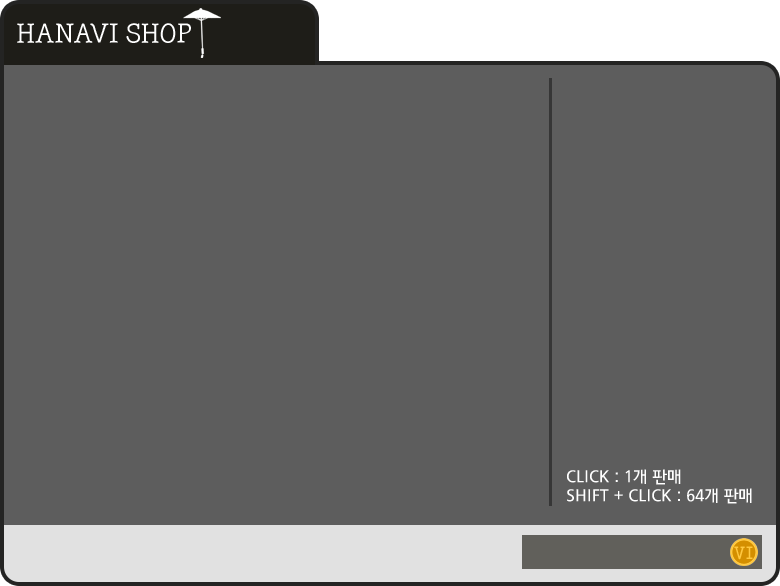
<style>
.page{position:relative;width:780px;height:586px;background:#5d5d5d}
.page>*{position:absolute;margin:0}
.t1{font:28.3px "KyoboHandwriting2020";color:#ffffff}
.t2{font:16.2px "Youth";color:#ffffff}
.t3{font:17.5px "Gungsuh";color:#ffc840}
</style>
<div class="page">
<p class="t1" style="left:17px;top:23px;width:174px;height:20px">HANAVI SHOP</p>
<p class="t2" style="left:567px;top:469px;width:114px;height:16px">CLICK : 1개 판매</p>
<p class="t2" style="left:567px;top:488px;width:185px;height:16px">SHIFT + CLICK : 64개 판매</p>
<p class="t3" style="left:734px;top:546px;width:19px;height:14px">VI</p>
</div>
